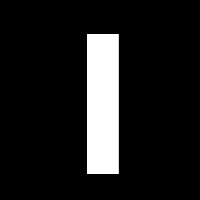
<style>
.page{position:relative;width:200px;height:200px;background:#000000}
.page>*{position:absolute;margin:0}
.t1{font:208.3px "MyriadPro-Bold";color:#ffffff}
</style>
<div class="page">
<p class="t1" style="left:87px;top:34px;width:32px;height:140px">I</p>
</div>
